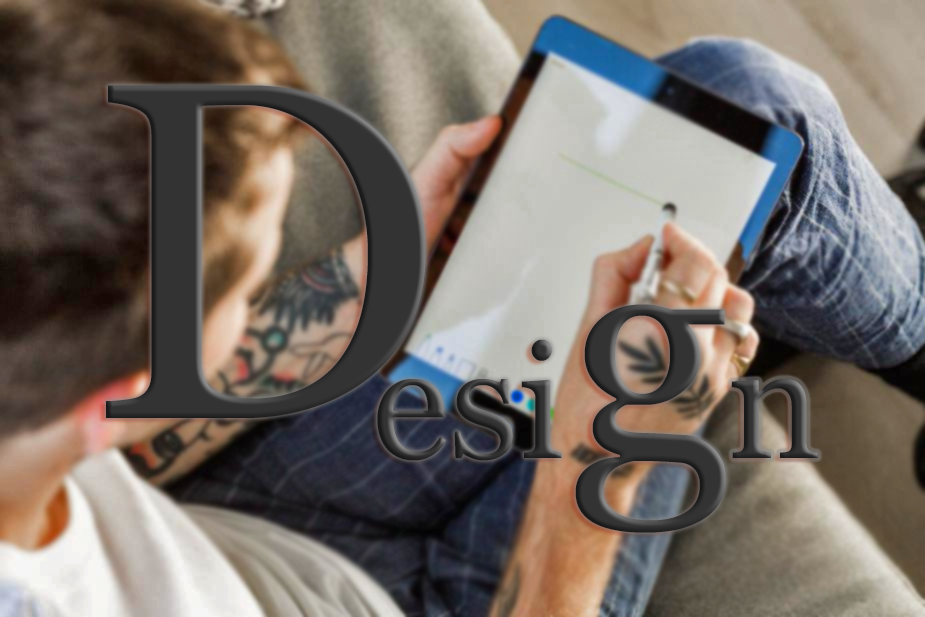
<style>
.page{position:relative;width:925px;height:617px}
.page>*{position:absolute;margin:0}
.t1{font:480px "Georgia";color:#333333}
.t2{font:320px "Georgia";color:#333333}
.t3{font:160px "Georgia";color:#333333}
</style>
<div class="page">
<p class="t1" style="left:106px;top:85px;width:320px;height:333px">D</p>
<p class="t2" style="left:575px;top:304px;width:151px;height:229px">g</p>
<p class="t3" style="left:377px;top:339px;width:185px;height:122px">esi</p>
<p class="t3" style="left:731px;top:379px;width:87px;height:79px">n</p>
</div>
